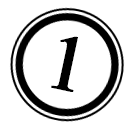
<style>
.page{position:relative;width:128px;height:128px;background:#ffffff}
.page>*{position:absolute;margin:0}
.t1{font:80px "TimesNewRomanPSMT";color:#000000;font-weight:bold}
</style>
<div class="page">
<p class="t1" style="left:51px;top:36px;width:27px;height:56px;rotate:12deg">1</p>
</div>
